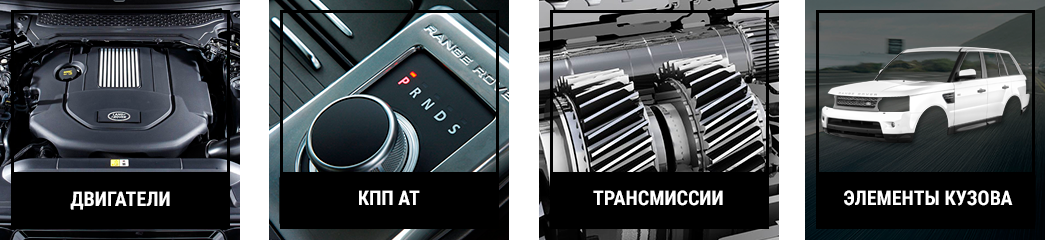
<style>
.page{position:relative;width:1045px;height:240px;background:#000000}
.page>*{position:absolute;margin:0}
.t1{font:20px "RobotoCondensed-Bold";color:#ffffff}
</style>
<div class="page">
<p class="t1" style="left:70px;top:191px;width:100px;height:19px">ДВИГАТЕЛИ</p>
<p class="t1" style="left:359px;top:190px;width:61px;height:15px">КПП АТ</p>
<p class="t1" style="left:593px;top:190px;width:130px;height:16px">ТРАНСМИССИИ</p>
<p class="t1" style="left:844px;top:190px;width:169px;height:16px">ЭЛЕМЕНТЫ КУЗОВА</p>
</div>
